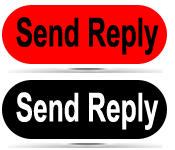
<style>
.page{position:relative;width:175px;height:150px;background:#ffffff}
.page>*{position:absolute;margin:0}
.t1{font:40px "ArialNarrow-Bold";color:#000000;scale:0.8 1}
.t2{font:40px "ArialNarrow-Bold";color:#ffffff;scale:0.8 1}
</style>
<div class="page">
<p class="t1" style="left:16px;top:17px;width:143px;height:38px">Send Reply</p>
<p class="t2" style="left:16px;top:92px;width:143px;height:38px">Send Reply</p>
</div>
